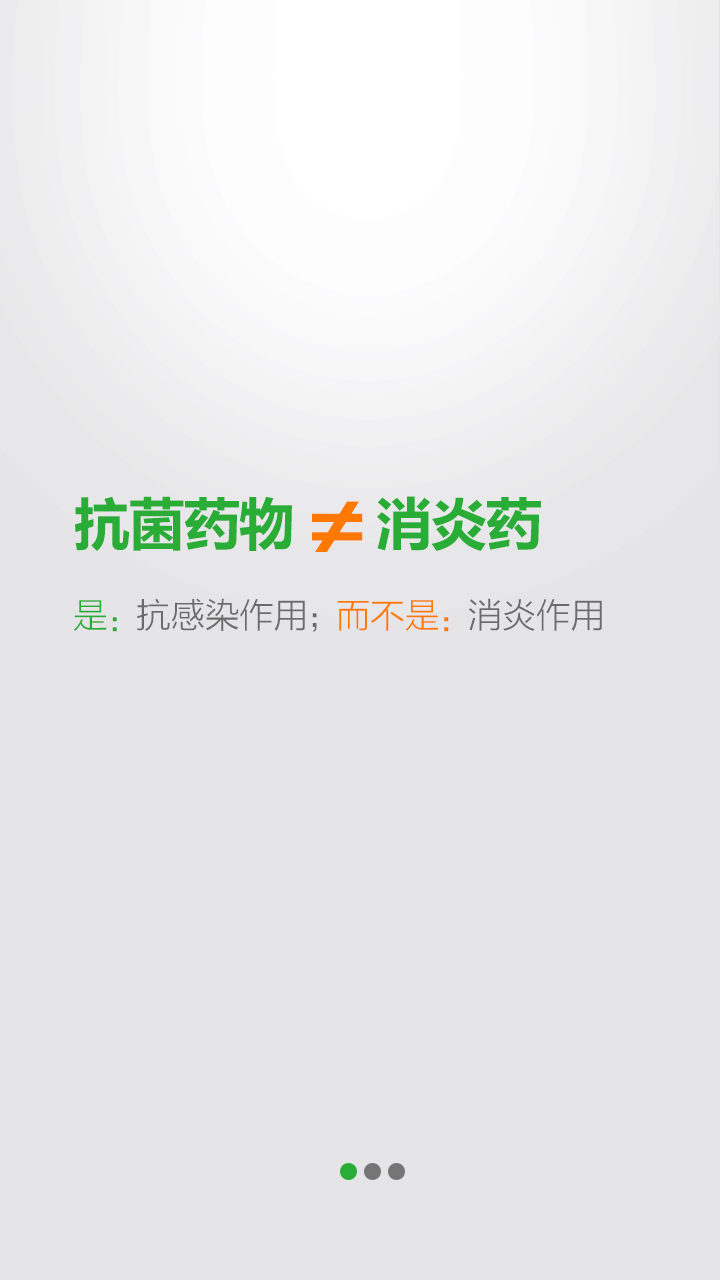
<style>
.page{position:relative;width:720px;height:1280px;background:#e5e5e7}
.page>*{position:absolute;margin:0}
.t1{font:55.9px "MicrosoftYaHei-Bold";color:#29ad37}
.t2{font:80.6px "MicrosoftYaHei-Bold";color:#ff7800;scale:1.21 1}
.t3{font:35px "FZLTXHK";color:#6b6b6b}
.t4{font:35px "FZLTXHK";color:#29ad37}
.t5{font:35px "FZLTXHK";color:#ff7800}
</style>
<div class="page">
<p class="t1" style="left:75px;top:496px;width:466px;height:55px">抗菌药物     消炎药</p>
<p class="t2" style="left:312px;top:501px;width:51px;height:51px">≠</p>
<p class="t3" style="left:74px;top:598px;width:528px;height:34px"><span class="t4">是：</span>抗感染作用；<span class="t5">而不是：</span>消炎作用</p>
</div>
